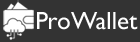
<style>
.page{position:relative;width:140px;height:42px;background:#333333}
.page>*{position:absolute;margin:0}
.t1{font:25px "GillSansMT";color:#ffffff}
</style>
<div class="page">
<p class="t1" style="left:37px;top:12px;width:101px;height:18px">ProWallet</p>
</div>
